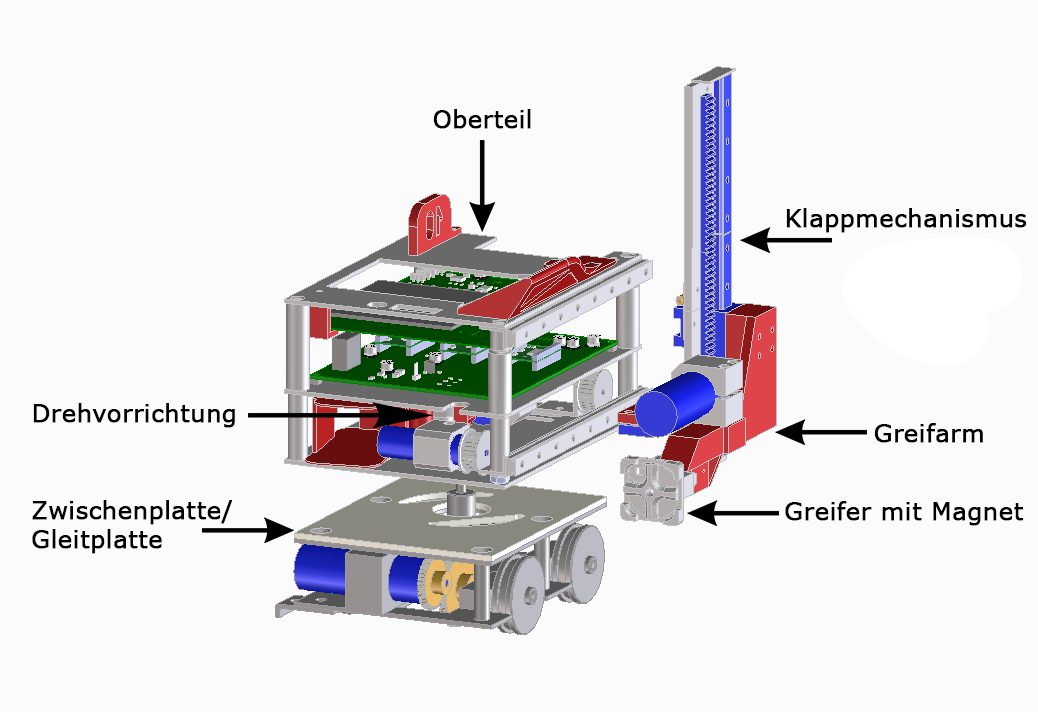
<style>
.page{position:relative;width:1038px;height:712px;background:#fbfbfc}
.page>*{position:absolute;margin:0}
.t1{font:24px "Verdana";color:#000000;font-weight:bold}
</style>
<div class="page">
<p class="t1" style="left:433px;top:109px;width:98px;height:20px">Oberteil</p>
<p class="t1" style="left:786px;top:208px;width:241px;height:25px">Klappmechanismus</p>
<p class="t1" style="left:33px;top:403px;width:202px;height:25px">Drehvorrichtung</p>
<p class="t1" style="left:874px;top:423px;width:109px;height:20px">Greifarm</p>
<p class="t1" style="left:32px;top:500px;width:201px;height:54px">Zwischenplatte/<br>Gleitplatte</p>
<p class="t1" style="left:785px;top:501px;width:239px;height:25px">Greifer mit Magnet</p>
</div>
